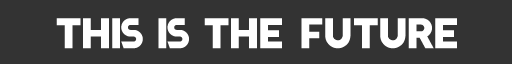
<style>
.page{position:relative;width:512px;height:64px;background:#333333}
.page>*{position:absolute;margin:0}
.t1{font:60px "Basic_LAZER";color:#ffffff}
</style>
<div class="page">
<p class="t1" style="left:56px;top:18px;width:401px;height:31px">this is the future</p>
</div>
